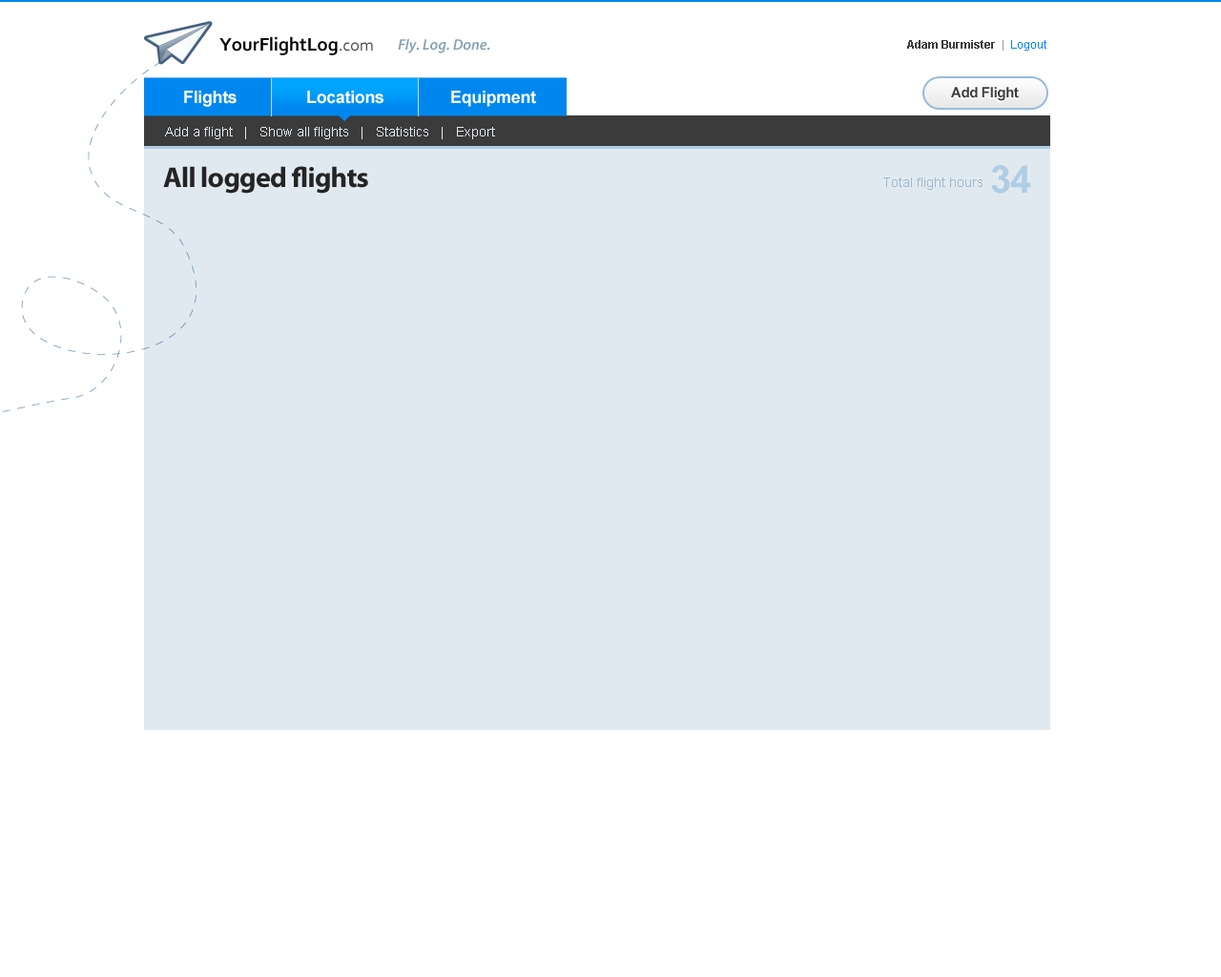
<style>
.page{position:relative;width:1221px;height:977px;background:#ffffff}
.page>*{position:absolute;margin:0}
.t1{font:19.1px "Corbel-Bold";color:#000000}
.t2{font:17.2px "Corbel";color:#474747}
.t3{font:15.3px "MyriadPro-SemiboldIt";color:#89a1b3}
.t4{font:11.4px "Arial-BoldMT";color:#3b3b3b}
.t5{font:11.4px "ArialMT";color:#999999}
.t6{font:11.4px "ArialMT";color:#0087ef}
.t7{font:14.3px "Arial-BoldMT";letter-spacing:-0.025em;color:#3b3b3b}
.t8{font:17.2px "Arial-BoldMT";letter-spacing:-0.02em;color:#ffffff}
.t9{font:13.4px "ArialMT";color:#e2eaf1}
.t10{font:28.6px "MyriadPro-Bold";letter-spacing:-0.025em;color:#242424}
.t11{font:38.2px "Arial-BoldMT";letter-spacing:-0.025em;color:#afcde4}
.t12{font:13.4px "ArialMT";color:#9db8cc}
</style>
<div class="page">
<p class="t1" style="left:219px;top:36px;width:154px;height:19px">YourFlightLog<span class="t2">.com</span></p>
<p class="t3" style="left:398px;top:38px;width:92px;height:15px">Fly. Log. Done.</p>
<p class="t4" style="left:907px;top:40px;width:139px;height:11px">Adam Burmister<span class="t5">  |  </span><span class="t6">Logout</span></p>
<p class="t7" style="left:951px;top:87px;width:68px;height:14px">Add Flight</p>
<p class="t8" style="left:184px;top:91px;width:53px;height:16px">Flights</p>
<p class="t8" style="left:307px;top:91px;width:76px;height:13px">Locations</p>
<p class="t8" style="left:451px;top:91px;width:85px;height:16px">Equipment</p>
<p class="t9" style="left:165px;top:127px;width:330px;height:12px">Add a flight   |   Show all flights   |   Statistics   |   Export</p>
<p class="t10" style="left:163px;top:166px;width:205px;height:28px">All logged flights</p>
<p class="t11" style="left:991px;top:165px;width:40px;height:29px">34</p>
<p class="t12" style="left:883px;top:177px;width:99px;height:13px">Total flight hours</p>
</div>
